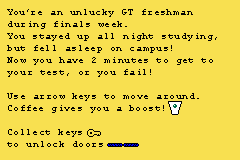
<style>
.page{position:relative;width:240px;height:160px;background:#f8e050}
.page>*{position:absolute;margin:0}
.t1{font:10px "CourierNewPSMT";letter-spacing:0.05em;color:#000000}
</style>
<div class="page">
<p class="t1" style="left:7px;top:9px;width:210px;height:138px">You’re an unlucky GT freshman during finals week.<br>You stayed up all night studying, but fell asleep on campus!<br>Now you have 2 minutes to get to your test, or you fail!<br><br>Use arrow keys to move around.<br>Coffee gives you a boost!<br><br>Collect keys <br>to unlock doors</p>
</div>
